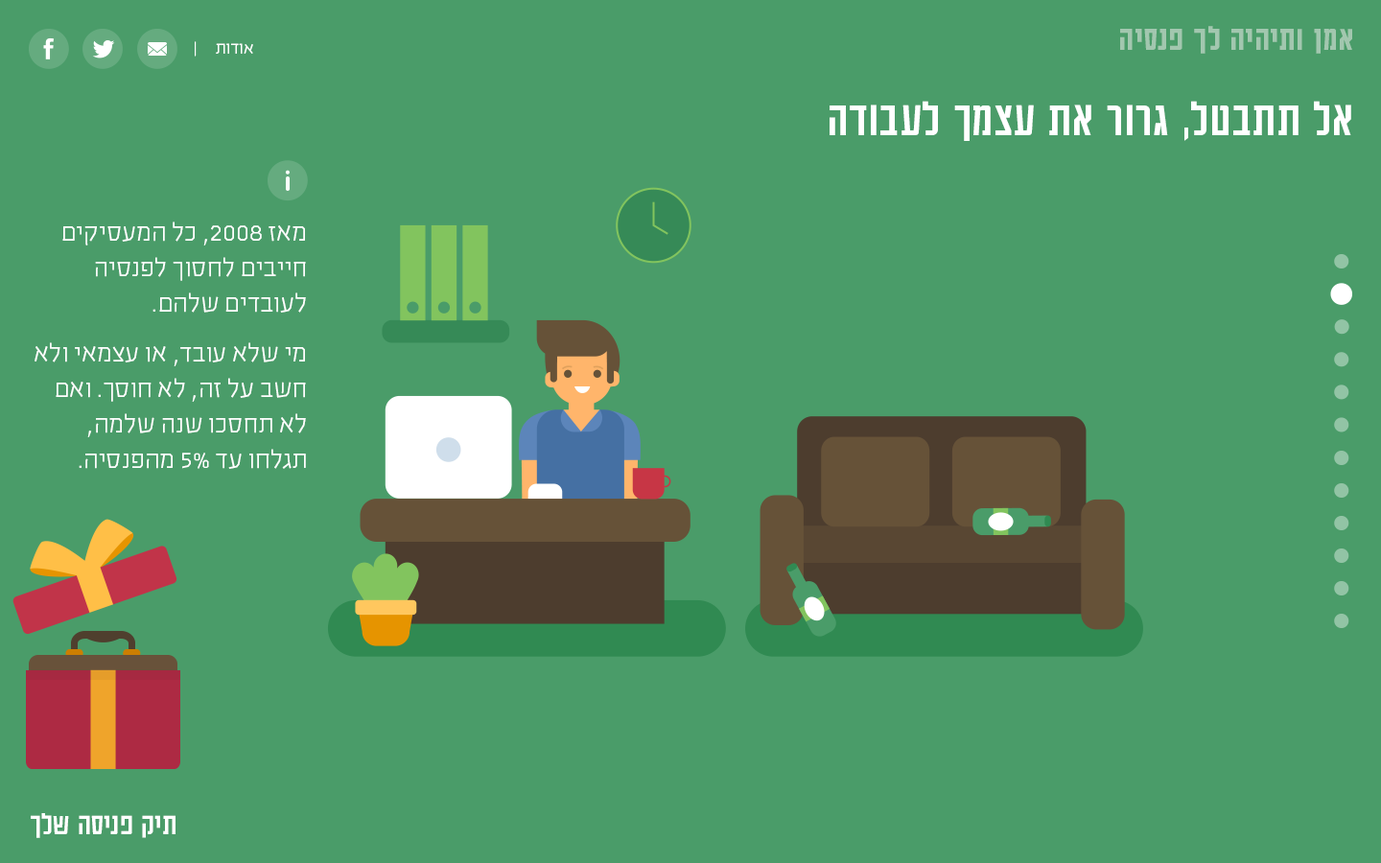
<style>
.page{position:relative;width:1381px;height:863px;background:#4a9c69}
.page>*{position:absolute;margin:0}
.t1{font:37.8px "AdumaFOT-Medium";color:#a2c7af}
.t2{font:19.2px "EzerBlock_OE-Light";color:#ffffff}
.t3{font:54.5px "AdumaFOT-Regular";color:#ffffff}
.t4{font:28.8px/35.5px "EzerBlock_OE-Light";color:#ffffff}
.t5{font:33.6px "AdumaFOT-Regular";color:#ffffff}
</style>
<div class="page">
<p class="t1" style="left:1120px;top:26px;width:232px;height:28px">אמן ותיהיה לך פנסיה</p>
<p class="t2" style="left:195px;top:41px;width:58px;height:16px">אודות     |</p>
<p class="t3" style="left:830px;top:101px;width:522px;height:40px">אל תתבטל, גרור את עצמך לעבודה</p>
<p class="t4" style="left:35px;top:222px;width:271px;height:247px">מאז 2008, כל המעסיקים חייבים לחסוך לפנסיה לעובדים שלהם.<br><br>מי שלא עובד, או עצמאי ולא חשב על זה, לא חוסך. ואם לא תחסכו שנה שלמה, תגלחו עד 5% מהפנסיה.</p>
<p class="t5" style="left:31px;top:813px;width:145px;height:25px">תיק פניסה שלך</p>
</div>
